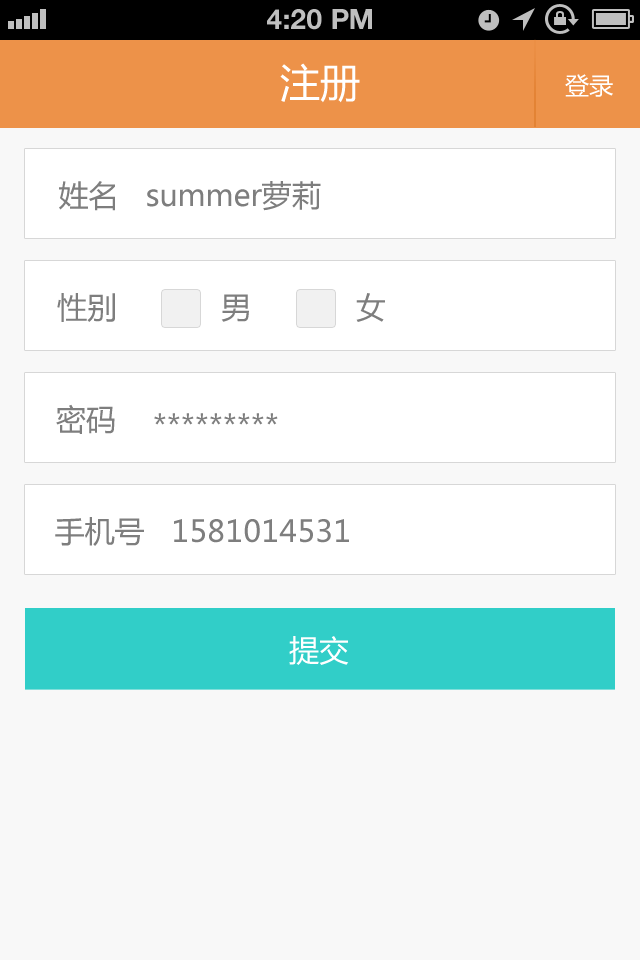
<style>
.page{position:relative;width:640px;height:960px;background:#f8f8f8}
.page>*{position:absolute;margin:0}
.t1{font:28px "HelveticaNeue-Bold";color:#bfbfbf;text-transform:uppercase}
.t2{font:40px "MicrosoftYaHei";color:#ffffff}
.t3{font:24px "MicrosoftYaHei";color:#ffffff}
.t4{font:30px "MicrosoftYaHei";color:#7e7e7e}
.t5{font:30px "MicrosoftYaHei";color:#ffffff}
</style>
<div class="page">
<p class="t1" style="left:267px;top:9px;width:105px;height:21px">4:20 PM</p>
<p class="t2" style="left:280px;top:63px;width:80px;height:40px">注册</p>
<p class="t3" style="left:565px;top:74px;width:48px;height:23px">登录</p>
<p class="t4" style="left:59px;top:181px;width:262px;height:30px">姓名   summer萝莉</p>
<p class="t4" style="left:57px;top:293px;width:58px;height:29px">性别</p>
<p class="t4" style="left:221px;top:294px;width:28px;height:28px">男</p>
<p class="t4" style="left:356px;top:293px;width:29px;height:29px">女</p>
<p class="t4" style="left:56px;top:404px;width:59px;height:30px">密码</p>
<p class="t4" style="left:154px;top:413px;width:124px;height:12px">*********</p>
<p class="t4" style="left:55px;top:517px;width:294px;height:29px">手机号   1581014531</p>
<p class="t5" style="left:289px;top:636px;width:60px;height:29px">提交</p>
</div>
